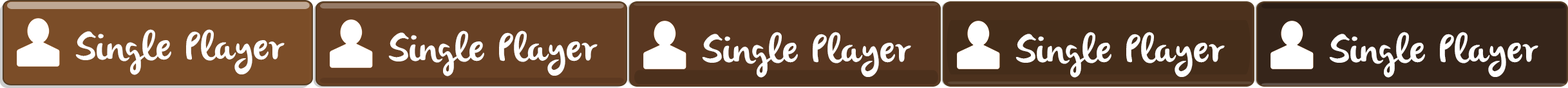
<style>
.page{position:relative;width:1568px;height:88px}
.page>*{position:absolute;margin:0}
.t1{font:39.2px "olivier";letter-spacing:0.02em;color:#ffffff}
</style>
<div class="page">
<p class="t1" style="left:75px;top:29px;width:210px;height:46px">Single Player</p>
<p class="t1" style="left:388px;top:30px;width:210px;height:46px">Single Player</p>
<p class="t1" style="left:702px;top:32px;width:209px;height:45px">Single Player</p>
<p class="t1" style="left:1015px;top:32px;width:210px;height:45px">Single Player</p>
<p class="t1" style="left:1329px;top:32px;width:209px;height:45px">Single Player</p>
</div>
